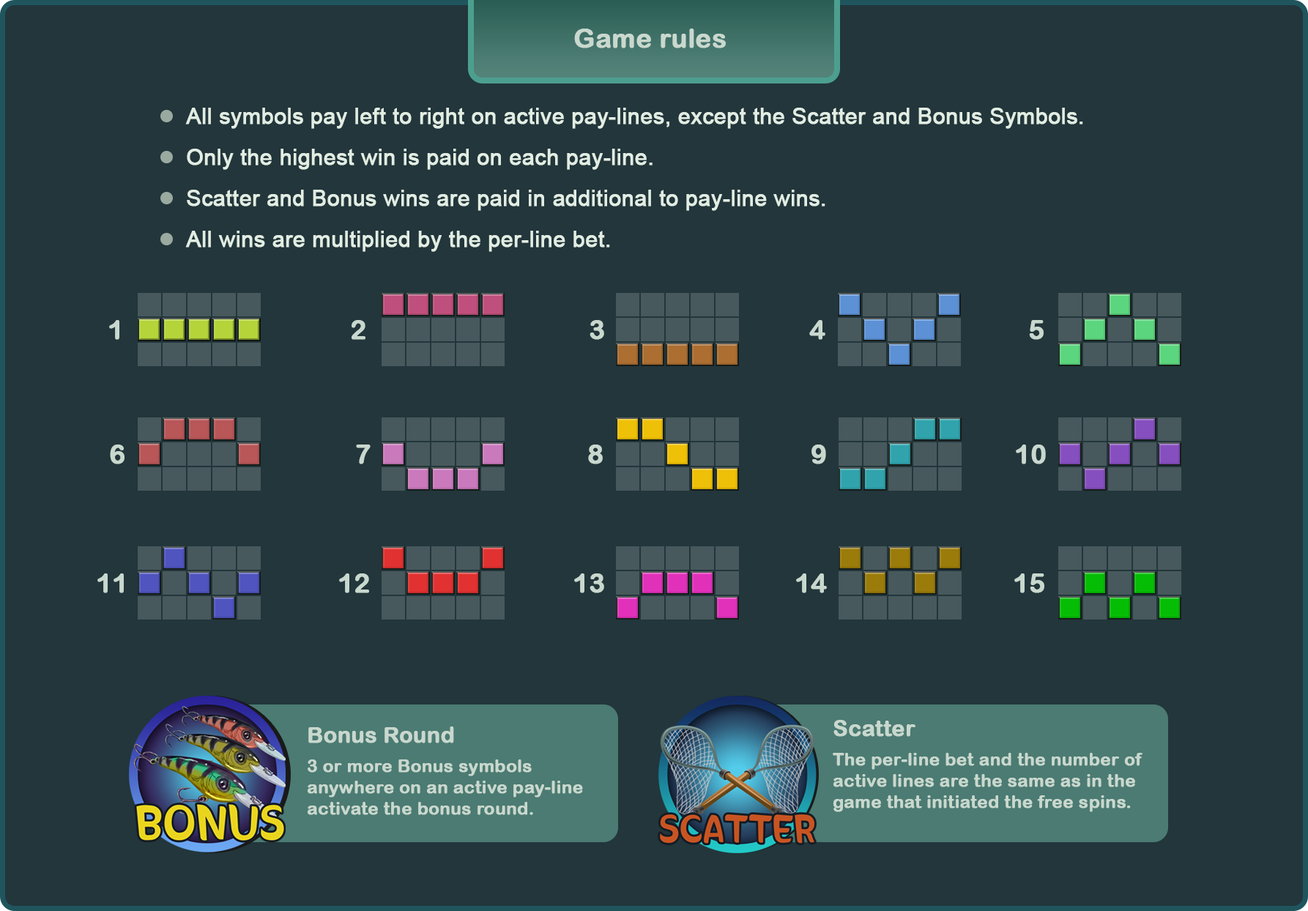
<style>
.page{position:relative;width:1308px;height:911px;background:#22363b}
.page>*{position:absolute;margin:0}
.t1{font:26.4px "ArialRoundedMTBold";color:#c9d8ce;font-weight:bold}
.t2{font:22px "ArialMT";color:#e2ede3;font-weight:bold}
.t3{font:17.6px "ArialRoundedMTBold";color:#c9d8ce;font-weight:bold}
.t4{font:22px "ArialRoundedMTBold";color:#c9d8ce;font-weight:bold}
.t5{font:17.6px/29.3px "ArialRoundedMTBold";color:#c9d8ce;font-weight:bold}
</style>
<div class="page">
<p class="t1" style="left:574px;top:29px;width:152px;height:19px">Game rules</p>
<p class="t2" style="left:185px;top:108px;width:899px;height:144px">All symbols pay left to right on active pay-lines, except the Scatter and Bonus Symbols.<br>Only the highest win is paid on each pay-line.<br>Scatter and Bonus wins are paid in additional to pay-line wins.<br>All wins are multiplied by the per-line bet.</p>
<p class="t1" style="left:109px;top:320px;width:10px;height:20px">1</p>
<p class="t1" style="left:352px;top:320px;width:14px;height:20px">2</p>
<p class="t1" style="left:590px;top:320px;width:14px;height:20px">3</p>
<p class="t1" style="left:810px;top:320px;width:16px;height:20px">4</p>
<p class="t1" style="left:1029px;top:320px;width:15px;height:20px">5</p>
<p class="t1" style="left:110px;top:445px;width:15px;height:19px">6</p>
<p class="t1" style="left:356px;top:445px;width:15px;height:19px">7</p>
<p class="t1" style="left:588px;top:445px;width:15px;height:19px">8</p>
<p class="t1" style="left:812px;top:445px;width:14px;height:19px">9</p>
<p class="t1" style="left:1016px;top:445px;width:30px;height:19px">10</p>
<p class="t1" style="left:97px;top:574px;width:27px;height:19px">11</p>
<p class="t1" style="left:339px;top:574px;width:30px;height:19px">12</p>
<p class="t1" style="left:574px;top:574px;width:30px;height:19px">13</p>
<p class="t1" style="left:796px;top:574px;width:31px;height:19px">14</p>
<p class="t1" style="left:1015px;top:574px;width:30px;height:19px">15</p>
<p class="t3" style="left:833px;top:720px;width:310px;height:92px"><span class="t4">Scatter<br></span><span class="t5">The per-line bet and the number </span>of active lines are the same as in the game that initiated the free spins.</p>
<p class="t3" style="left:308px;top:727px;width:275px;height:88px"><span class="t4">Bonus Round<br></span><span class="t5">3 or more Bonus symbols </span>anywhere on an active pay-line activate the bonus round.</p>
</div>
